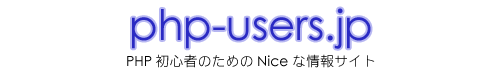
<style>
.page{position:relative;width:500px;height:70px;background:#ffffff}
.page>*{position:absolute;margin:0}
.t1{font:42px "CenturyGothic";color:#2a2ac3}
.t2{font:14px "DFGothicPStd-W3";color:#000000}
.t3{font:14px "CenturyGothic";color:#000000}
</style>
<div class="page">
<p class="t1" style="left:132px;top:8px;width:239px;height:41px">php-users.jp</p>
<p class="t2" style="left:127px;top:54px;width:248px;height:14px"><span class="t3">PHP</span>初心者のための<span class="t3">Nice</span>な情報サイト</p>
</div>
